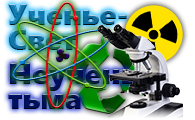
<style>
.page{position:relative;width:195px;height:120px}
.page>*{position:absolute;margin:0}
.t1{font:30px/25px "SegoeUIBlack"}
</style>
<div class="page">
<p class="t1" style="left:8px;top:4px;width:119px;height:46px">Ученье-<br>Свет</p>
<p class="t1" style="left:8px;top:63px;width:158px;height:46px">Неученье-<br>тьма</p>
</div>
